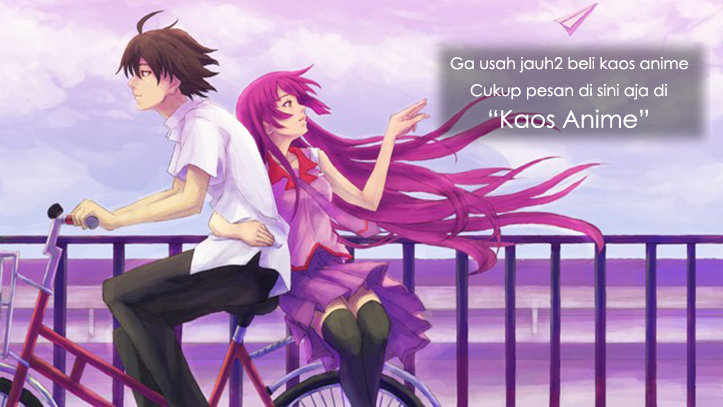
<style>
.page{position:relative;width:723px;height:407px}
.page>*{position:absolute;margin:0}
.t1{font:16px "CenturyGothic";color:#ffffff}
.t2{font:24px "CenturyGothic";color:#ffffff}
</style>
<div class="page">
<p class="t1" style="left:450px;top:57px;width:239px;height:16px">Ga usah jauh2 beli kaos anime</p>
<p class="t1" style="left:470px;top:84px;width:197px;height:16px">Cukup pesan di sini aja di</p>
<p class="t2" style="left:489px;top:109px;width:159px;height:19px">“Kaos Anime”</p>
</div>
